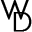
<style>
.page{position:relative;width:32px;height:32px;background:#ffffff}
.page>*{position:absolute;margin:0}
.t1{font:28px "Humanist521BT-Light";color:#000000;font-weight:bold}
</style>
<div class="page">
<p class="t1" style="left:0px;top:0px;width:29px;height:20px">W</p>
<p class="t1" style="left:13px;top:12px;width:19px;height:20px">D</p>
</div>
